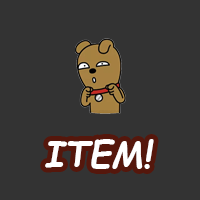
<style>
.page{position:relative;width:200px;height:200px;background:#333333}
.page>*{position:absolute;margin:0}
.t1{font:36px "ComicSansMS-BoldItalic";color:#ffffff}
</style>
<div class="page">
<p class="t1" style="left:45px;top:139px;width:109px;height:30px">ITEM!</p>
</div>
